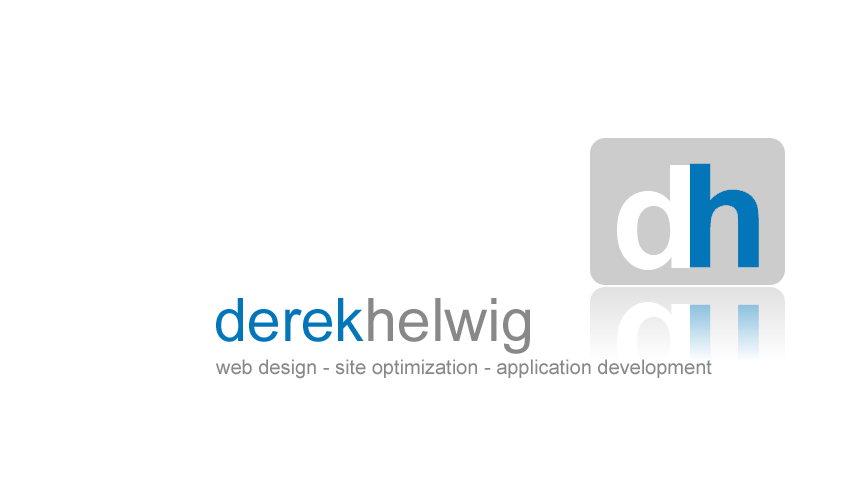
<style>
.page{position:relative;width:850px;height:500px;background:#ffffff}
.page>*{position:absolute;margin:0}
.t1{font:60px "ArialMT";color:#888888}
.t2{font:60px "ArialMT";color:#0375b9}
.t3{font:20px "ArialMT";color:#888888}
</style>
<div class="page">
<p class="t1" style="left:216px;top:298px;width:314px;height:56px"><span class="t2">derek</span>helwig</p>
<p class="t3" style="left:216px;top:359px;width:496px;height:20px">web design - site optimization - application development</p>
</div>
